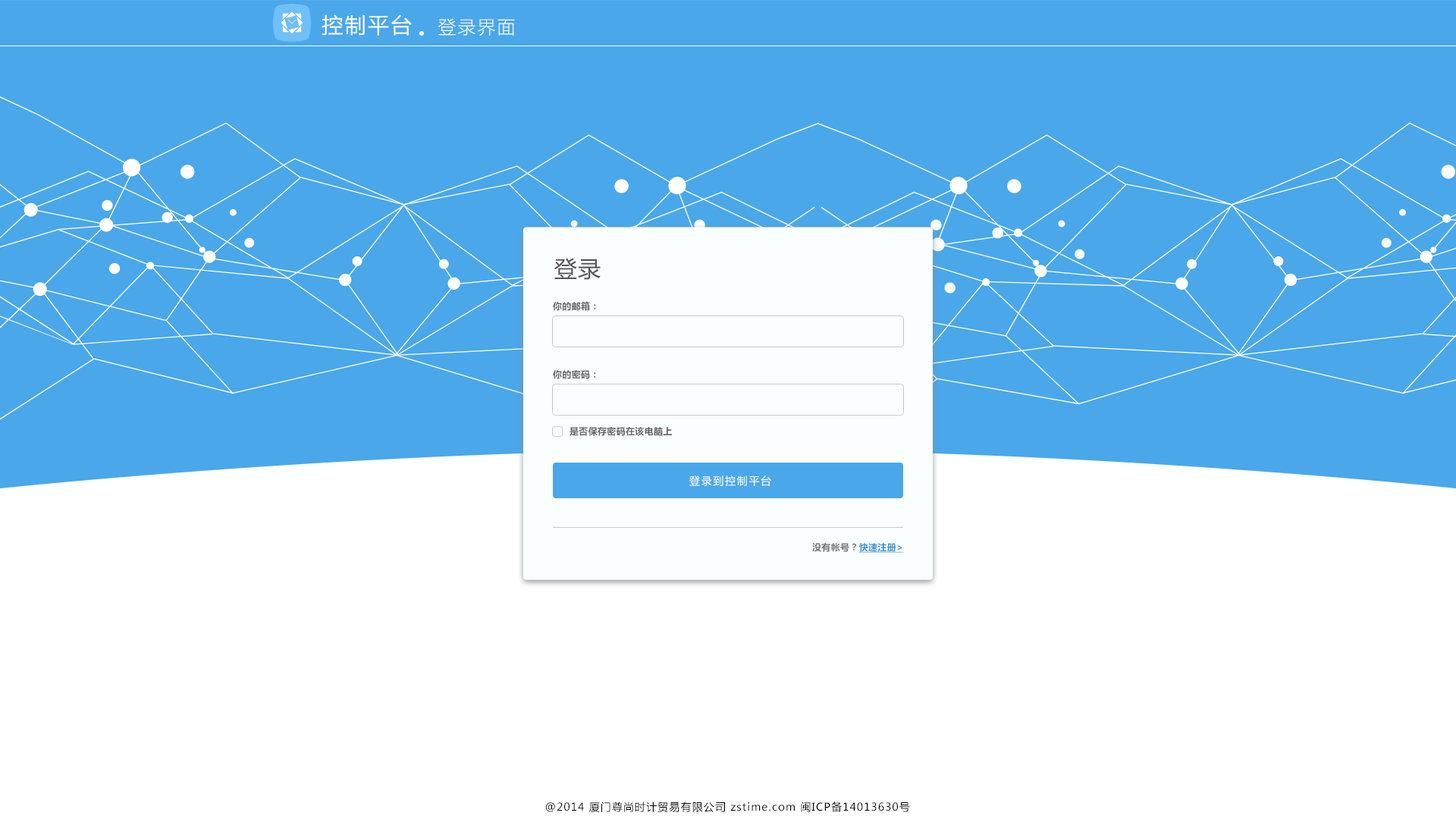
<style>
.page{position:relative;width:1456px;height:819px;background:#4aa7ea}
.page>*{position:absolute;margin:0}
.t1{font:21.2px "MicrosoftYaHei";letter-spacing:0.08em;color:#fefefe}
.t2{font:18.2px "MicrosoftYaHeiLight";letter-spacing:0.08em;color:#fefefe}
.t3{font:22.7px "MicrosoftYaHei";letter-spacing:0.028em;color:#555555}
.t4{font:9.1px "MicrosoftYaHei-Bold";letter-spacing:0.028em;color:#666666}
.t5{font:10.6px "MicrosoftYaHei";letter-spacing:0.12em;color:#ffffff}
.t6{font:9.1px "MicrosoftYaHei-Bold";letter-spacing:0.028em;color:#777777}
.t7{font:9.1px "MicrosoftYaHei-Bold";letter-spacing:0.028em;color:#3794d7;text-decoration:underline}
.t8{font:10.6px "MicrosoftYaHei";letter-spacing:0.08em;color:#000000}
</style>
<div class="page">
<p class="t1" style="left:322px;top:14px;width:90px;height:22px">控制平台</p>
<p class="t2" style="left:438px;top:18px;width:77px;height:18px">登录界面</p>
<p class="t3" style="left:554px;top:258px;width:47px;height:22px">登录</p>
<p class="t4" style="left:553px;top:301px;width:43px;height:10px">你的邮箱：</p>
<p class="t4" style="left:553px;top:370px;width:43px;height:9px">你的密码：</p>
<p class="t4" style="left:570px;top:427px;width:102px;height:9px">是否保存密码在该电脑上</p>
<p class="t5" style="left:689px;top:475px;width:82px;height:11px">登录到控制平台</p>
<p class="t6" style="left:812px;top:543px;width:92px;height:10px">没有帐号？<span class="t7">快速注册&gt;</span></p>
<p class="t8" style="left:545px;top:802px;width:365px;height:10px">@2014 厦门尊尚时计贸易有限公司 zstime.com 闽ICP备14013630号</p>
</div>
